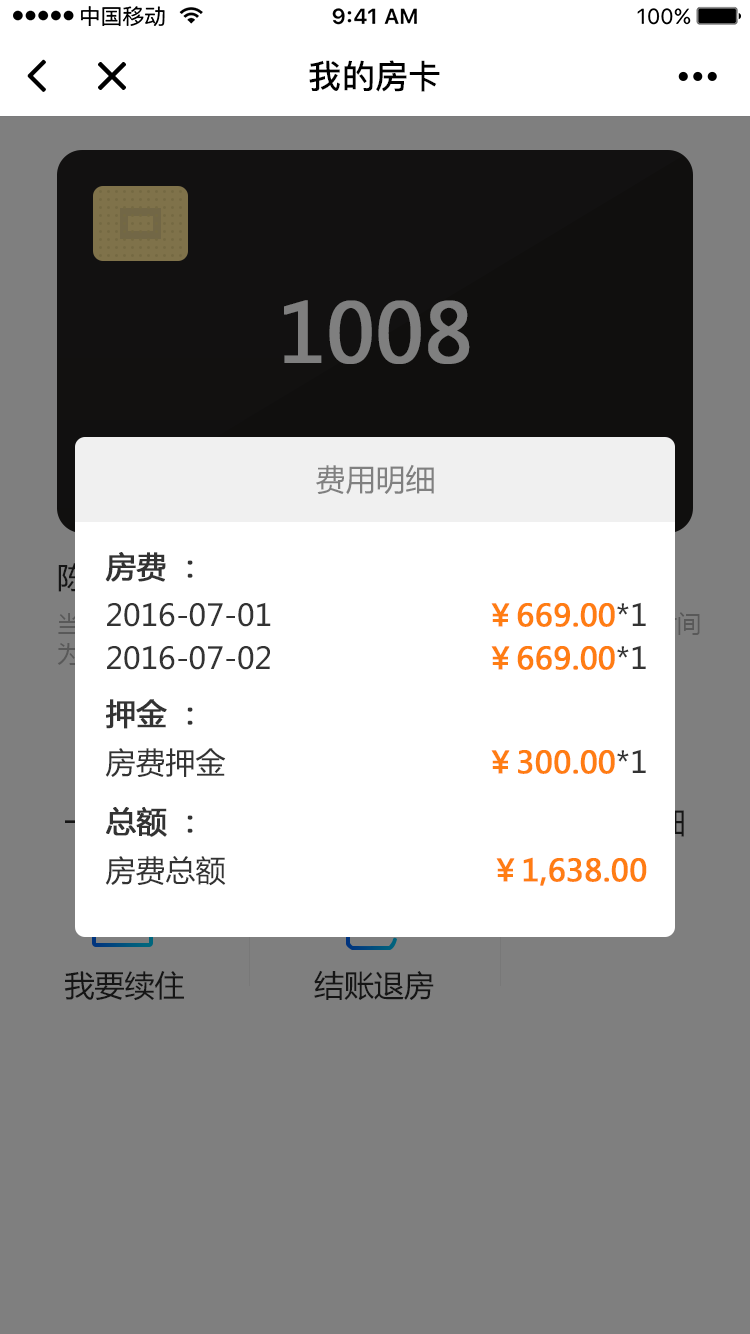
<style>
.page{position:relative;width:750px;height:1334px;background:#7f7f7f}
.page>*{position:absolute;margin:0}
.t1{font:33.2px "PingFang-SC-Bold";color:#000000}
.t2{font:80px "MicrosoftYaHei";color:#7f7f7f;font-weight:bold}
.t3{font:30px "MicrosoftYaHei";color:#808080}
.t4{font:30px "MicrosoftYaHei";color:#333333;font-weight:bold}
.t5{font:30px "MicrosoftYaHei";color:#333333}
.t6{font:30px "MicrosoftYaHei";color:#ff7d13;font-weight:bold}
.t7{font:30px "MicrosoftYaHei";color:#2b2b2b}
</style>
<div class="page">
<p class="t1" style="left:309px;top:60px;width:131px;height:32px">我的房卡</p>
<p class="t2" style="left:284px;top:300px;width:186px;height:64px">1008</p>
<p class="t3" style="left:316px;top:464px;width:118px;height:31px">费用明细</p>
<p class="t4" style="left:105px;top:552px;width:88px;height:30px">房费：</p>
<p class="t5" style="left:107px;top:602px;width:164px;height:25px">2016-07-01</p>
<p class="t6" style="left:491px;top:602px;width:155px;height:25px">￥669.00<span class="t5">*1</span></p>
<p class="t5" style="left:107px;top:645px;width:163px;height:25px">2016-07-02</p>
<p class="t6" style="left:491px;top:645px;width:155px;height:25px">￥669.00<span class="t5">*1</span></p>
<p class="t4" style="left:106px;top:699px;width:87px;height:30px">押金：</p>
<p class="t5" style="left:105px;top:748px;width:121px;height:29px">房费押金</p>
<p class="t6" style="left:491px;top:749px;width:155px;height:25px">￥300.00<span class="t5">*1</span></p>
<p class="t4" style="left:106px;top:807px;width:87px;height:30px">总额：</p>
<p class="t5" style="left:105px;top:856px;width:121px;height:30px">房费总额</p>
<p class="t6" style="left:496px;top:857px;width:151px;height:29px">￥1,638.00</p>
<p class="t7" style="left:64px;top:971px;width:120px;height:30px">我要续住</p>
<p class="t7" style="left:314px;top:970px;width:120px;height:30px">结账退房</p>
</div>
